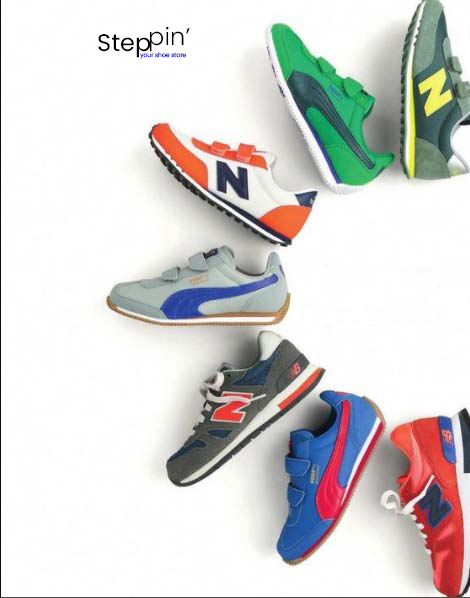
<style>
.page{position:relative;width:470px;height:598px;background:#fefefe}
.page>*{position:absolute;margin:0}
.t1{font:24px "Poppins-Light";letter-spacing:0.005em;color:#000000}
.t2{font:24px "Poppins-Regular";letter-spacing:0.005em;color:#000000}
.t3{font:6px "Poppins-Light";letter-spacing:0.005em;color:#0606cc}
</style>
<div class="page">
<p class="t1" style="left:149px;top:26px;width:41px;height:26px">pin’</p>
<p class="t2" style="left:98px;top:34px;width:53px;height:24px">Step</p>
<p class="t3" style="left:140px;top:52px;width:47px;height:7px">your shoe store</p>
</div>
